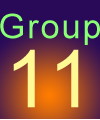
<style>
.page{position:relative;width:100px;height:120px;background:#290a59}
.page>*{position:absolute;margin:0}
.t1{font:34px "ArialMT";letter-spacing:0.06em;color:#88ff74}
.t2{font:80px "ArialMT";letter-spacing:0.06em;color:#fff995}
</style>
<div class="page">
<p class="t1" style="left:0px;top:13px;width:100px;height:32px">Group</p>
<p class="t2" style="left:13px;top:49px;width:66px;height:59px">11</p>
</div>
